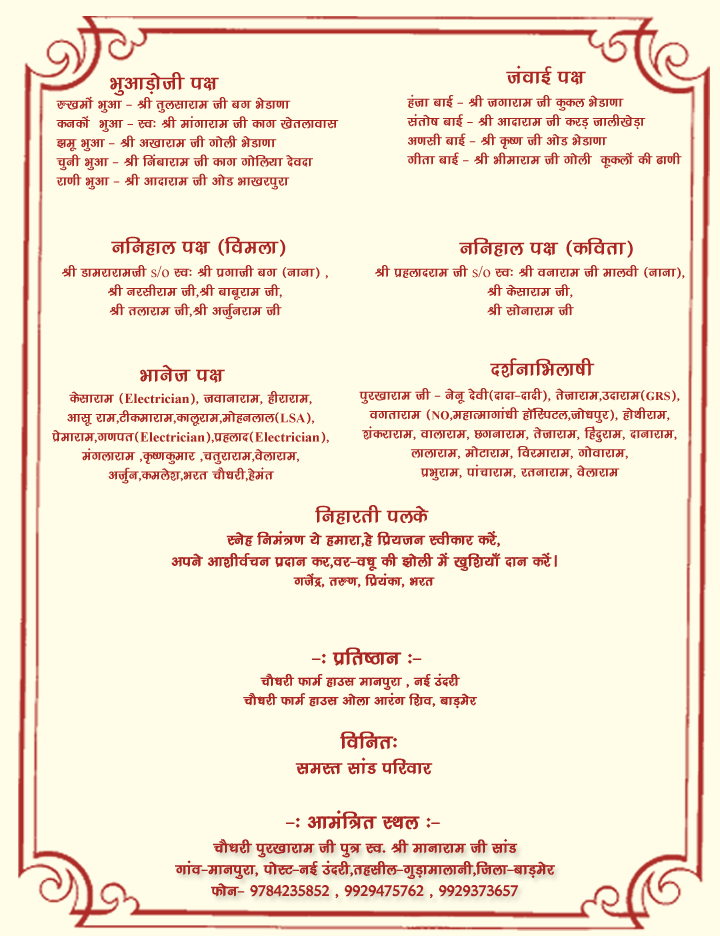
<style>
.page{position:relative;width:720px;height:936px;background:#fffde8}
.page>*{position:absolute;margin:0}
.t1{font:24px "KrutiDev240";color:#aa2621}
.t2{font:16px "KrutiDev240";color:#aa2621}
.t3{font:16px "TimesNewRomanPSMT";color:#aa2621}
.t4{font:12px "TimesNewRomanPS-BoldMT";color:#aa2621}
.t5{font:14px "TimesNewRomanPS-BoldMT";color:#aa2621}
.t6{font:13px "TimesNewRomanPS-BoldMT";color:#aa2621}
.t7{font:18px "KrutiDev240";color:#aa2621}
.t8{font:21px "KrutiDev240";color:#aa2621}
</style>
<div class="page">
<p class="t1" style="left:506px;top:65px;width:80px;height:20px">taokbZ i{k</p>
<p class="t1" style="left:110px;top:72px;width:109px;height:24px">HkqvkM+ksth i{k</p>
<p class="t2" style="left:56px;top:96px;width:283px;height:94px">#[keksa Hkqvk &amp; Jh rqylkjke th cx HksMk.kk <br>dudksa  Hkqvk &amp; Lo% Jh ekaxkjke th dkx [ksrykokl<br>&gt;ew Hkqvk &amp; Jh v[kkjke th xksyh HksMk.kk <br>pquh Hkqvk &amp; Jh fuackjke th dkx xksfy;k nsonk<br>jk.kh Hkqvk &amp; Jh vknkjke th vksM Hkk[kjiqjk</p>
<p class="t2" style="left:407px;top:94px;width:275px;height:75px">gatk ckbZ &amp; Jh txkjke th dqdy HksMk.kk <br> larks"k ckbZ &amp; Jh vknkjke th djM+ tkyh[ksM+k <br> v.klh ckbZ &amp; Jh —".k th vksM HksMk.kk <br> xhrk ckbZ &amp; Jh Hkhekjke th xksyh  dwdyksa dh &lt;k.kh</p>
<p class="t1" style="left:111px;top:236px;width:175px;height:21px">ufugky i{k ¼foeyk½</p>
<p class="t1" style="left:459px;top:237px;width:174px;height:21px">ufugky i{k ¼dfork½</p>
<p class="t2" style="left:62px;top:265px;width:266px;height:55px;text-align:center">Jh Mkejkjketh <span class="t3">s/o</span> Lo% Jh çxkth cx ¼ukuk½ ]<br>Jh ujlhjke th]Jh ckcwjke th]<br>Jh rykjke th]Jh vtqZujke th</p>
<p class="t2" style="left:375px;top:265px;width:310px;height:51px;text-align:center">Jh çgyknjke th <span class="t3">s/o</span> Lo% Jh oukjke th ekyoh ¼ukuk½]<br>Jh dslkjke th]<br>Jh lksukjke th</p>
<p class="t1" style="left:140px;top:364px;width:85px;height:19px">Hkkust i{k</p>
<p class="t1" style="left:490px;top:358px;width:105px;height:20px">n'kZukfHkyk"kh</p>
<p class="t2" style="left:359px;top:388px;width:321px;height:93px;text-align:center">iqj[kkjke th &amp; usuw nsoh¼nknk&amp;nknh½] rstkjke]mnkjke¼<span class="t4">GRS</span>½]<br>oxrkjke ¼<span class="t4">NO</span>]egkRekxka/kh g‚fLiVy]tks/kiqj½] gksFkhjke]<br>'kadjkjke] okykjke] Nxukjke] rstkjke] fganqjke] nkukjke] <br>ykykjke] eksVkjke] fojekjke] xksokjke] <br>çHkqjke] ikapkjke] jrukjke] osykjke</p>
<p class="t2" style="left:52px;top:391px;width:277px;height:93px;text-align:center">dslkjke ¼<span class="t5">Electrician</span>½] tokukjke] ghjkjke]<br>vklw jke]Vhdekjke]dkywjke]eksguyky¼<span class="t6">LSA</span>½]<br>çsekjke]x.kir¼<span class="t5">Electrician</span>½]çgykn¼<span class="t5">Electrician</span>½]<br>eaxykjke ]—".kdqekj ]prqjkjke]osykjke]<br>vtqZu]deys'k]Hkjr pkS/kjh]gsear</p>
<p class="t1" style="left:315px;top:505px;width:114px;height:20px">fugkjrh iyds</p>
<p class="t7" style="left:171px;top:530px;width:386px;height:58px;text-align:center">Lusg fuea=.k ;s gekjk]gs fç;tu Lohdkj djsa]<br>vius vk'khoZpu çnku dj]oj&amp;o/kw dh &gt;ksyh esa [kqf'k;k¡ nku djsaA<span class="t2"> <br>xtsaæ] r#.k] fç;adk] Hkjr</span></p>
<p class="t1" style="left:312px;top:647px;width:110px;height:19px">&amp;% çfr"Bku %&amp;</p>
<p class="t2" style="left:243px;top:673px;width:234px;height:36px;text-align:center">pkS/kjh QkeZ gkml ekuiqjk ] ubZ manjh<br>pkS/kjh QkeZ gkml vksyk vkjax f'ko] ckM+esj</p>
<p class="t1" style="left:340px;top:731px;width:57px;height:19px">fofur%</p>
<p class="t8" style="left:295px;top:757px;width:138px;height:18px">leLr lkaM ifjokj</p>
<p class="t1" style="left:286px;top:810px;width:154px;height:20px">&amp;% vkeaf=r LFky %&amp;</p>
<p class="t7" style="left:175px;top:838px;width:380px;height:61px;text-align:center">pkSèkjh iqj[kkjke th iq= Lo- Jh ekukjke th lkaM<br>xkao&amp;ekuiqjk] iksLV&amp;ubZ manjh]rglhy&amp;xqM+kekykuh]ftyk&amp;ckM+esj<br>Qksu&amp; 9784235852 ] 9929475762 ] 9929373657</p>
</div>
